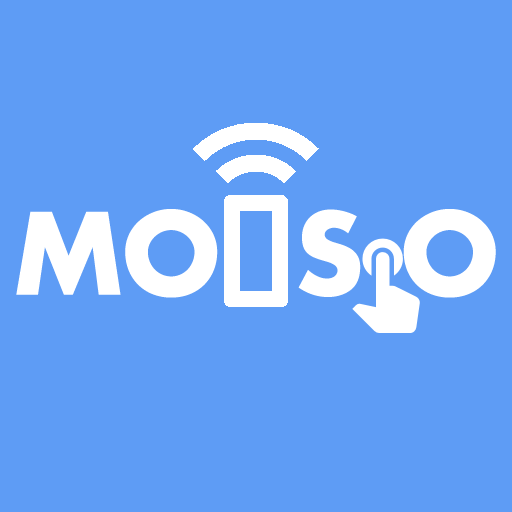
<style>
.page{position:relative;width:512px;height:512px;background:#5e9cf5}
.page>*{position:absolute;margin:0}
.t1{font:110px "Futura-Bold";color:#ffffff}
</style>
<div class="page">
<p class="t1" style="left:16px;top:209px;width:480px;height:89px">MO  S O</p>
</div>
